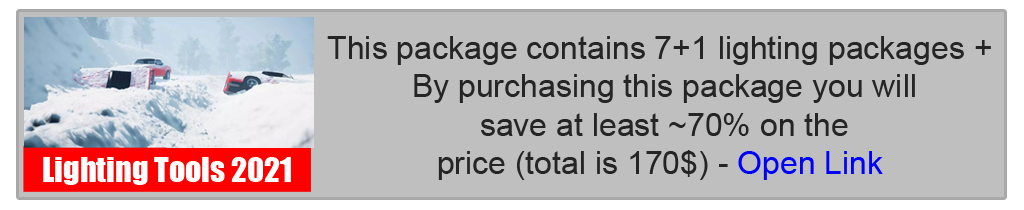
<style>
.page{position:relative;width:1024px;height:210px;background:#bfbfbf}
.page>*{position:absolute;margin:0}
.t1{font:32px "ArialMT";color:#252525}
.t2{font:32px "ArialMT";color:#0000ff}
.t3{font:32px "Impact";color:#ffffff}
</style>
<div class="page">
<p class="t1" style="left:327px;top:36px;width:664px;height:144px;text-align:center">+ This package contains 7+1 lighting packages <br>By purchasing this package you will <br>save at least ~70% on the <br>price (total is 170$) - <span class="t2">Open Link</span></p>
<p class="t3" style="left:43px;top:157px;width:248px;height:28px">Lighting Tools 2021</p>
</div>
